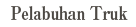
<style>
.page{position:relative;width:136px;height:27px;background:#ffffff}
.page>*{position:absolute;margin:0}
.t1{font:18px "RyuminPro-ExBold";letter-spacing:-0.04em;color:#4c4843;scale:0.9 1}
</style>
<div class="page">
<p class="t1" style="left:11px;top:6px;width:117px;height:14px">Pelabuhan Truk</p>
</div>
